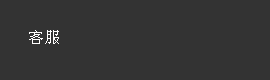
<style>
.page{position:relative;width:270px;height:80px;background:#333333}
.page>*{position:absolute;margin:0}
.t1{font:15px "MingLiU";color:#fefdfd}
</style>
<div class="page">
<p class="t1" style="left:29px;top:30px;width:30px;height:14px">客服</p>
</div>
